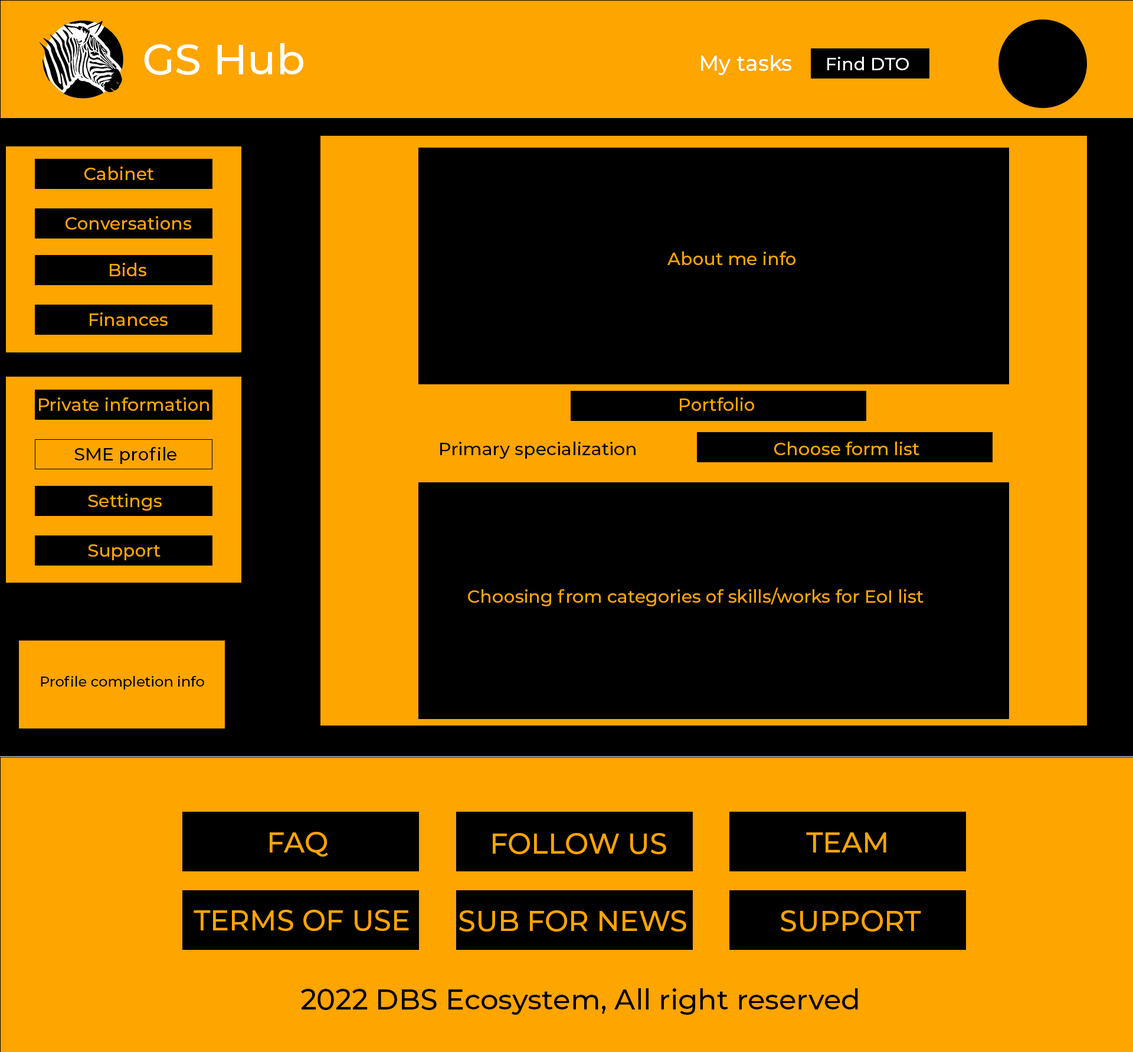
<style>
.page{position:relative;width:1133px;height:1052px;background:#000000}
.page>*{position:absolute;margin:0}
.t1{font:42.5px "Montserrat-Medium";color:#ffffff}
.t2{font:21.3px "Montserrat-Medium";color:#ffffff}
.t3{font:17.7px "Montserrat-Medium";color:#ffffff}
.t4{font:17.7px "Montserrat-Medium";color:#ffa500}
.t5{font:17.7px "Montserrat-Medium";color:#000000}
.t6{font:14.2px "Montserrat-Medium";color:#000000}
.t7{font:28.3px "Montserrat-Medium";color:#ffa500}
.t8{font:28.3px "Montserrat-Medium";color:#000000}
</style>
<div class="page">
<p class="t1" style="left:144px;top:43px;width:159px;height:32px">GS Hub</p>
<p class="t2" style="left:701px;top:55px;width:91px;height:20px">My tasks</p>
<p class="t3" style="left:828px;top:57px;width:81px;height:13px">Find DTO</p>
<p class="t4" style="left:84px;top:166px;width:70px;height:14px">Cabinet</p>
<p class="t4" style="left:66px;top:216px;width:125px;height:14px">Conversations</p>
<p class="t4" style="left:668px;top:251px;width:128px;height:14px">About me info</p>
<p class="t4" style="left:110px;top:263px;width:36px;height:13px">Bids</p>
<p class="t4" style="left:90px;top:312px;width:78px;height:14px">Finances</p>
<p class="t4" style="left:39px;top:397px;width:170px;height:14px">Private information</p>
<p class="t4" style="left:680px;top:397px;width:74px;height:14px">Portfolio</p>
<p class="t5" style="left:74px;top:447px;width:103px;height:17px">SME profile</p>
<p class="t5" style="left:440px;top:442px;width:196px;height:17px">Primary specialization</p>
<p class="t4" style="left:775px;top:442px;width:145px;height:13px">Choose form list</p>
<p class="t4" style="left:88px;top:494px;width:74px;height:17px">Settings</p>
<p class="t4" style="left:88px;top:544px;width:73px;height:16px">Support</p>
<p class="t4" style="left:468px;top:587px;width:456px;height:19px">Choosing from categories of skills/works for EoI list</p>
<p class="t6" style="left:41px;top:676px;width:163px;height:14px">Profile completion info</p>
<p class="t7" style="left:270px;top:832px;width:58px;height:25px">FAQ</p>
<p class="t7" style="left:493px;top:833px;width:174px;height:21px">FOLLOW US</p>
<p class="t7" style="left:806px;top:832px;width:81px;height:20px">TEAM</p>
<p class="t7" style="left:194px;top:910px;width:215px;height:21px">TERMS OF USE</p>
<p class="t7" style="left:459px;top:910px;width:228px;height:22px">SUB FOR NEWS</p>
<p class="t7" style="left:781px;top:910px;width:141px;height:22px">SUPPORT</p>
<p class="t8" style="left:301px;top:988px;width:557px;height:27px">2022 DBS Ecosystem, All right reserved</p>
</div>
